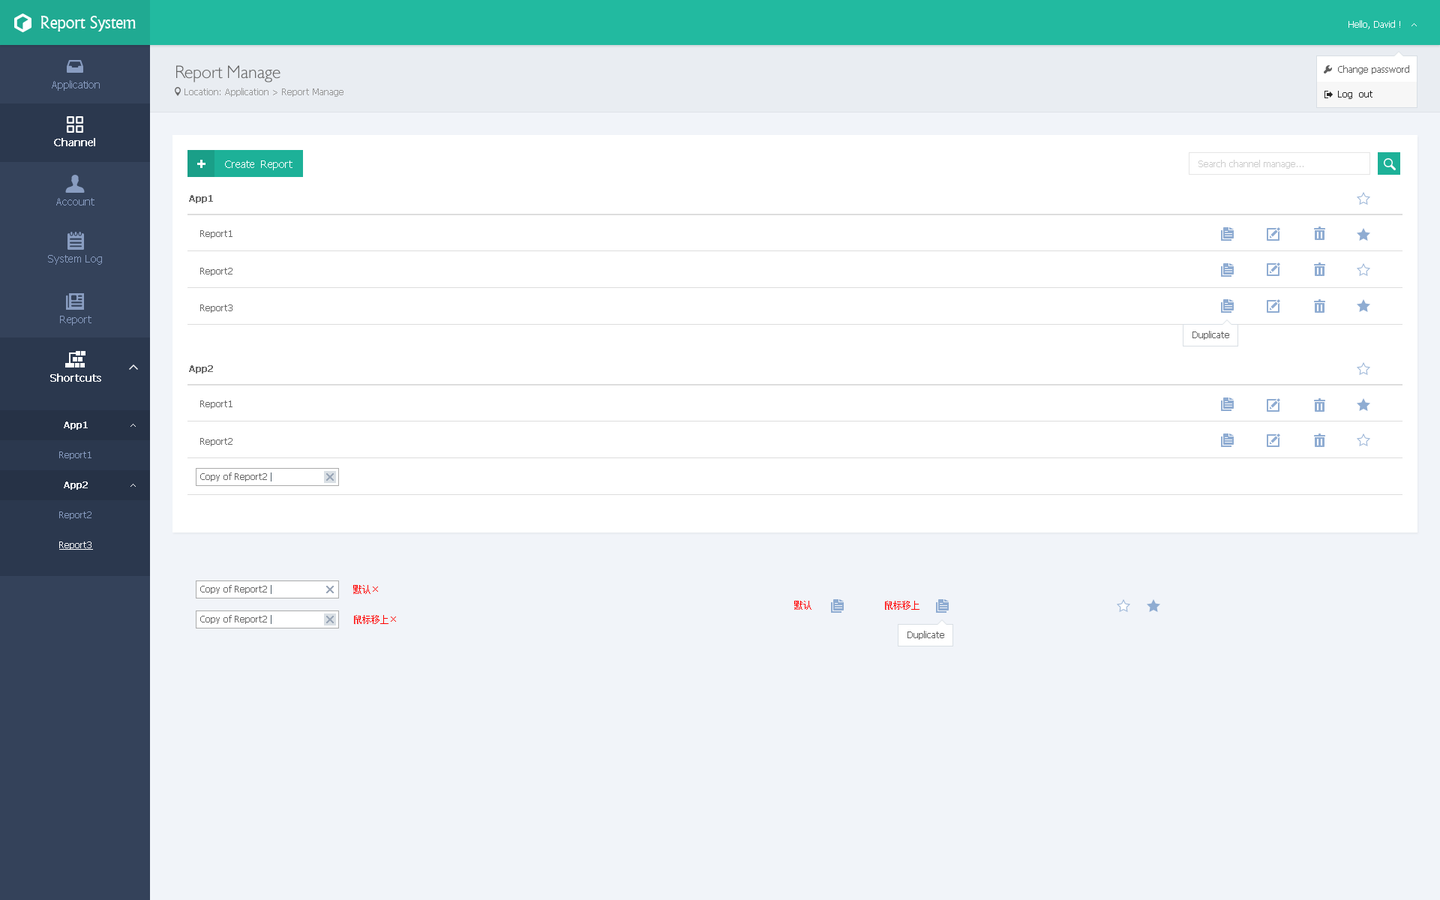
<style>
.page{position:relative;width:1440px;height:900px;background:#f1f4f9}
.page>*{position:absolute;margin:0}
.t1{font:18px "Narkisim";letter-spacing:-0.022em;color:#ffffff}
.t2{font:9px "Tahoma";color:#ffffff}
.t3{font:18px "084-CAI978";color:#666666}
.t4{font:9px "Tahoma";color:#5f5f5f}
.t5{font:10.5px "Tahoma";color:#899dc1}
.t6{font:9px "Tahoma";color:#999999}
.t7{font:9px "Tahoma";color:#262626}
.t8{font:10.5px "Tahoma";color:#ffffff;font-weight:bold}
.t9{font:10.5px "Tahoma";color:#ffffff}
.t10{font:9px "Tahoma";color:#cccccc}
.t11{font:9px "Tahoma";color:#666666;font-weight:bold}
.t12{font:9px "Tahoma";color:#666666}
.t13{font:9px "Tahoma";color:#ffffff;font-weight:bold}
.t14{font:9px "Tahoma";color:#899dc1}
.t15{font:9px "Tahoma";color:#ffffff;text-decoration:underline}
.t16{font:9px "SimSun";color:#ff0000}
</style>
<div class="page">
<p class="t1" style="left:40px;top:16px;width:96px;height:16px">Report System</p>
<p class="t2" style="left:1348px;top:20px;width:52px;height:9px">Hello, David !</p>
<p class="t3" style="left:176px;top:65px;width:104px;height:17px">Report Manage</p>
<p class="t4" style="left:1338px;top:65px;width:71px;height:9px">Change password</p>
<p class="t5" style="left:52px;top:80px;width:48px;height:11px">Application</p>
<p class="t6" style="left:184px;top:88px;width:160px;height:9px">Location: Application &gt; Report Manage</p>
<p class="t7" style="left:1338px;top:91px;width:34px;height:8px">Log  out</p>
<p class="t8" style="left:54px;top:138px;width:41px;height:8px">Channel</p>
<p class="t9" style="left:225px;top:160px;width:67px;height:10px">Create  Report</p>
<p class="t10" style="left:1198px;top:160px;width:106px;height:9px">Search channel manage...</p>
<p class="t5" style="left:56px;top:198px;width:38px;height:8px">Account</p>
<p class="t11" style="left:189px;top:195px;width:24px;height:8px">App1</p>
<p class="t12" style="left:200px;top:230px;width:32px;height:8px">Report1</p>
<p class="t5" style="left:48px;top:255px;width:54px;height:10px">System Log</p>
<p class="t12" style="left:200px;top:268px;width:32px;height:8px">Report2</p>
<p class="t12" style="left:200px;top:304px;width:32px;height:9px">Report3</p>
<p class="t5" style="left:60px;top:316px;width:32px;height:10px">Report</p>
<p class="t4" style="left:1192px;top:331px;width:37px;height:9px">Duplicate</p>
<p class="t11" style="left:189px;top:365px;width:24px;height:9px">App2</p>
<p class="t8" style="left:50px;top:374px;width:51px;height:8px">Shortcuts</p>
<p class="t12" style="left:200px;top:400px;width:32px;height:9px">Report1</p>
<p class="t13" style="left:64px;top:422px;width:24px;height:8px">App1</p>
<p class="t12" style="left:200px;top:438px;width:32px;height:8px">Report2</p>
<p class="t14" style="left:59px;top:452px;width:33px;height:8px">Report1</p>
<p class="t12" style="left:200px;top:472px;width:67px;height:10px">Copy of Report2</p>
<p class="t13" style="left:64px;top:482px;width:24px;height:8px">App2</p>
<p class="t14" style="left:59px;top:512px;width:33px;height:8px">Report2</p>
<p class="t15" style="left:59px;top:542px;width:34px;height:8px">Report3</p>
<p class="t12" style="left:200px;top:585px;width:67px;height:9px">Copy of Report2</p>
<p class="t16" style="left:353px;top:585px;width:25px;height:9px">默认×</p>
<p class="t16" style="left:794px;top:601px;width:18px;height:9px">默认</p>
<p class="t16" style="left:885px;top:601px;width:35px;height:9px">鼠标移上</p>
<p class="t12" style="left:200px;top:615px;width:67px;height:9px">Copy of Report2</p>
<p class="t16" style="left:354px;top:615px;width:42px;height:9px">鼠标移上×</p>
<p class="t4" style="left:908px;top:631px;width:36px;height:9px">Duplicate</p>
</div>
